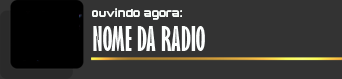
<style>
.page{position:relative;width:342px;height:79px;background:#333333}
.page>*{position:absolute;margin:0}
.t1{font:11px "Orbitron-Black";color:#f9fdfa}
.t2{font:31px "GillSansMT-ExtraCondensedBold";color:#fcfefd}
</style>
<div class="page">
<p class="t1" style="left:92px;top:8px;width:90px;height:12px">ouvindo agora:</p>
<p class="t2" style="left:93px;top:26px;width:112px;height:25px">NOME DA RADIO</p>
</div>
